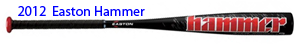
<style>
.page{position:relative;width:300px;height:44px;background:#ffffff}
.page>*{position:absolute;margin:0}
.t1{font:14px "MyriadPro-Regular";color:#0000ff}
</style>
<div class="page">
<p class="t1" style="left:18px;top:6px;width:127px;height:10px">2012  Easton Hammer</p>
</div>
